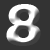
<style>
.page{position:relative;width:50px;height:50px;background:#333333}
.page>*{position:absolute;margin:0}
.t1{font:60px "ErasITC-Bold"}
</style>
<div class="page">
<p class="t1" style="left:6px;top:4px;width:35px;height:42px">8</p>
</div>
